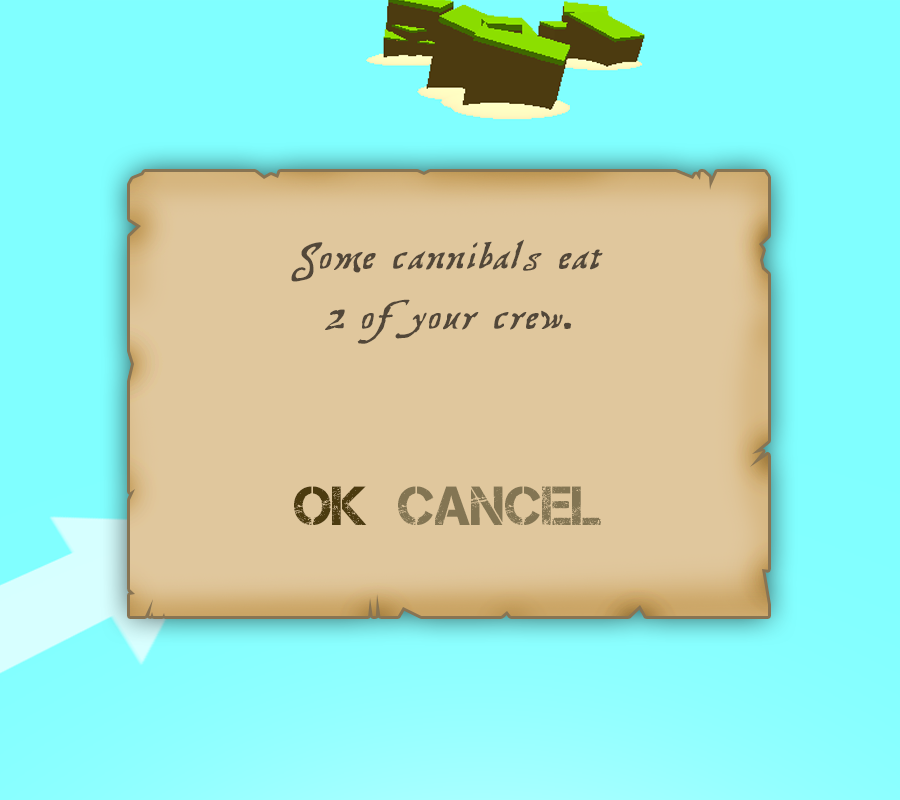
<style>
.page{position:relative;width:900px;height:800px;background:#e0c79d}
.page>*{position:absolute;margin:0}
.t1{font:50px "TreasureMapDeadhand";color:#524739}
.t2{font:55.1px "WordMeanFont";color:#4c3b10}
.t3{font:55.1px "WordMeanFont";color:#837553}
</style>
<div class="page">
<p class="t1" style="left:291px;top:239px;width:312px;height:105px;text-align:center">Some cannibals eat<br>2 of your crew.</p>
<p class="t2" style="left:294px;top:486px;width:73px;height:39px">OK</p>
<p class="t3" style="left:398px;top:486px;width:203px;height:39px">CANCEL</p>
</div>
